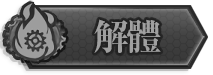
<style>
.page{position:relative;width:213px;height:75px}
.page>*{position:absolute;margin:0}
.t1{font:36px "RyuminPro-ExBold";letter-spacing:-0.08em;color:#a0a0a0}
</style>
<div class="page">
<p class="t1" style="left:94px;top:19px;width:67px;height:34px">解體</p>
</div>
